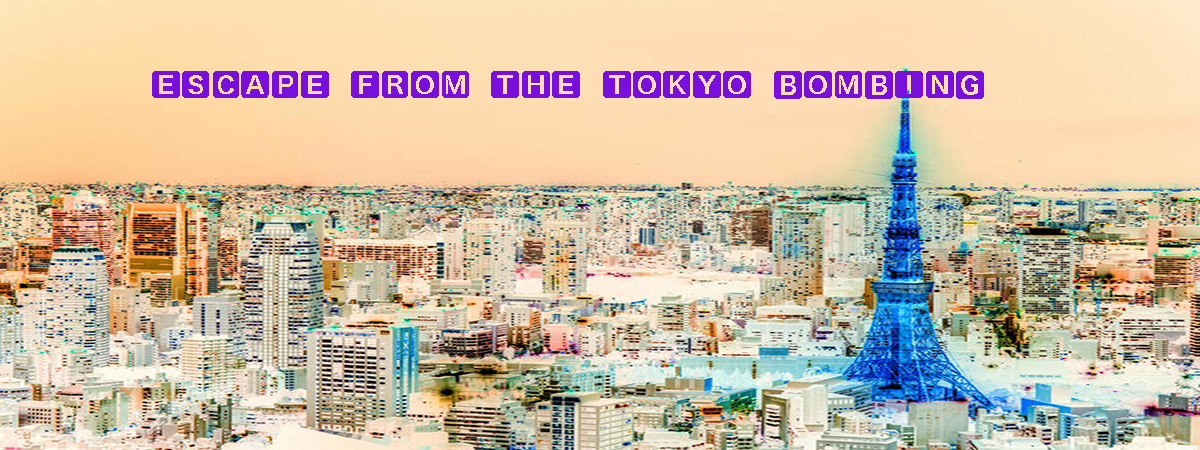
<style>
.page{position:relative;width:1200px;height:450px}
.page>*{position:absolute;margin:0}
.t1{font:30px "HiraKakuProN-W6";color:#790fdd}
</style>
<div class="page">
<p class="t1" style="left:152px;top:71px;width:832px;height:28px">🅴🆂🅲🅰🅿🅴 ​ 🅵🆁🅾🅼 ​ 🆃🅷🅴 ​ 🆃🅾🅺🆈🅾 ​ 🅱🅾🅼🅱🅸🅽🅶</p>
</div>
